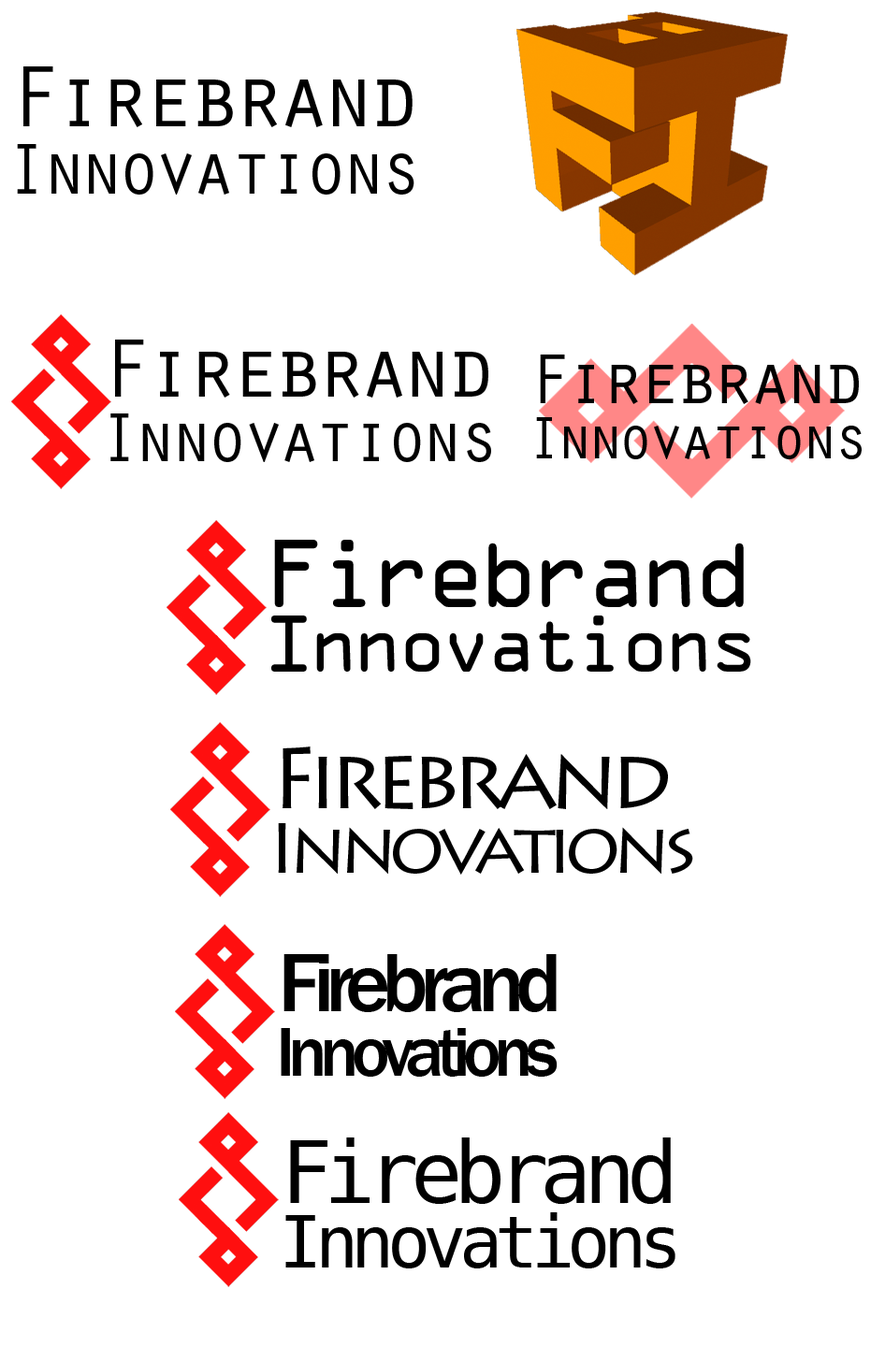
<style>
.page{position:relative;width:885px;height:1347px;background:#ffffff}
.page>*{position:absolute;margin:0}
.t1{font:89.8px "OratorStd";letter-spacing:-0.1em;color:#000000}
.t2{font:74.8px "OratorStd";letter-spacing:-0.1em;color:#000000}
.t3{font:86.2px "OratorStd";letter-spacing:-0.1em;color:#000000}
.t4{font:73.5px "OratorStd";letter-spacing:-0.1em;color:#000000}
.t5{font:71.8px "OratorStd";letter-spacing:-0.1em;color:#000000}
.t6{font:61.3px "OratorStd";letter-spacing:-0.1em;color:#000000}
.t7{font:86.2px "OCRAStd";letter-spacing:-0.1em;color:#000000}
.t8{font:71.8px "OCRAStd";letter-spacing:-0.1em;color:#000000}
.t9{font:86.2px "LithosPro-Regular";letter-spacing:-0.1em;color:#000000}
.t10{font:71.8px "LithosPro-Regular";letter-spacing:-0.1em;color:#000000}
.t11{font:86.2px "FranklinGothic-Medium";letter-spacing:-0.1em;color:#000000}
.t12{font:71.8px "FranklinGothic-Medium";letter-spacing:-0.1em;color:#000000}
.t13{font:86.2px "DejaVuSansMono";letter-spacing:-0.1em;color:#000000}
.t14{font:71.8px "DejaVuSansMono";letter-spacing:-0.1em;color:#000000}
</style>
<div class="page">
<p class="t1" style="left:23px;top:66px;width:390px;height:61px">Firebrand</p>
<p class="t2" style="left:17px;top:144px;width:397px;height:51px">Innovations</p>
<p class="t3" style="left:115px;top:340px;width:373px;height:58px">Firebrand</p>
<p class="t4" style="left:540px;top:355px;width:319px;height:49px">Firebrand</p>
<p class="t5" style="left:110px;top:414px;width:381px;height:48px">Innovations</p>
<p class="t6" style="left:536px;top:417px;width:326px;height:42px">Innovations</p>
<p class="t7" style="left:274px;top:540px;width:470px;height:67px">Firebrand</p>
<p class="t8" style="left:271px;top:616px;width:480px;height:56px">Innovations</p>
<p class="t9" style="left:283px;top:747px;width:385px;height:62px">Firebrand</p>
<p class="t10" style="left:278px;top:823px;width:415px;height:52px">Innovations</p>
<p class="t11" style="left:283px;top:954px;width:274px;height:58px">Firebrand</p>
<p class="t12" style="left:281px;top:1028px;width:277px;height:49px">Innovations</p>
<p class="t13" style="left:290px;top:1138px;width:381px;height:66px">Firebrand</p>
<p class="t14" style="left:285px;top:1213px;width:391px;height:56px">Innovations</p>
</div>
